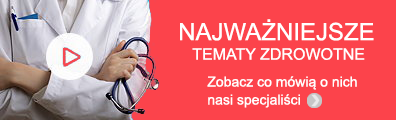
<style>
.page{position:relative;width:396px;height:120px;background:#fc434b}
.page>*{position:absolute;margin:0}
.t1{font:24px "ArialMT";color:#ffffff}
.t2{font:16px "ArialMT";color:#ffffff}
.t3{font:14px/18px "ArialMT";color:#ffffff}
</style>
<div class="page">
<p class="t1" style="left:180px;top:19px;width:194px;height:22px">NAJWAŻNIEJSZE</p>
<p class="t2" style="left:192px;top:48px;width:173px;height:12px">TEMATY ZDROWOTNE</p>
<p class="t3" style="left:207px;top:76px;width:150px;height:32px">Zobacz co mówią o nich<br>nasi specjaliści</p>
</div>
